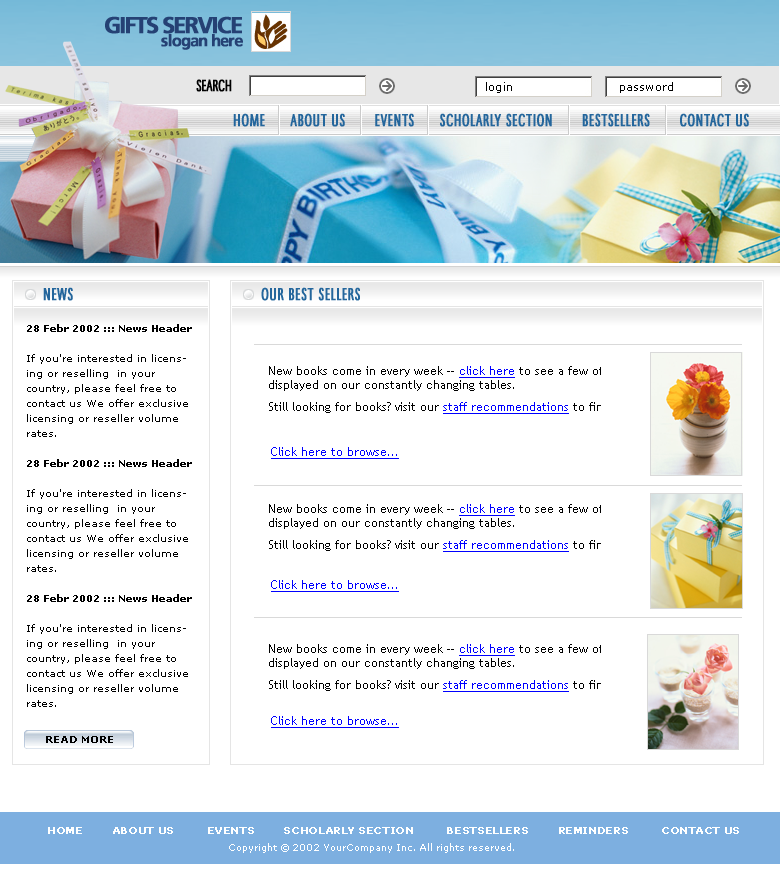
<style>
.page{position:relative;width:780px;height:884px;background:#ffffff}
.page>*{position:absolute;margin:0}
.t1{font:23px/13px "AGForeignerLightBoldBold";letter-spacing:-0.08em;color:#254174;font-weight:bold}
.t2{font:16px/13px "AGForeignerLightBoldBold";letter-spacing:-0.06em;color:#254174;font-weight:bold}
.t3{font:17px "MaximaCyrTCY-LighComp";letter-spacing:-0.02em;color:#000000;font-weight:bold}
.t4{font:11px "Verdana";letter-spacing:0.02em;color:#000000}
.t5{font:18px "MaximaCyrTCY-LighComp";letter-spacing:0.02em;color:#24669c;font-weight:bold}
.t6{font:10px/15px "Verdana";color:#000000}
.t7{font:10px/15px "Verdana-Bold";color:#000000}
.t8{font:10px "Verdana-Bold";color:#000000}
.t9{font:9px "Verdana";letter-spacing:-0.04em;color:#ffffff;font-weight:bold}
.t10{font:9px "Verdana";color:#ffffff}
</style>
<div class="page">
<p class="t1" style="left:105px;top:16px;width:138px;height:34px">GIFTS SERVICE<br>           <span class="t2">slogan here</span></p>
<p class="t3" style="left:196px;top:79px;width:36px;height:13px">SEARCH</p>
<p class="t4" style="left:486px;top:82px;width:187px;height:11px">login                         password</p>
<p class="t5" style="left:233px;top:113px;width:516px;height:14px">HOME      ABOUT US       EVENTS      SCHOLARLY SECTION       BESTSELLERS       CONTACT US</p>
<p class="t5" style="left:43px;top:287px;width:30px;height:14px">NEWS</p>
<p class="t5" style="left:261px;top:287px;width:99px;height:14px">OUR BEST SELLERS</p>
<p class="t6" style="left:27px;top:324px;width:165px;height:383px"><span class="t7">28 Febr 2002 ::: News Header<br></span><br>If you're interested in licensing or reselling  in your country, please feel free to contact us We offer exclusive licensing or reseller volume rates.<br><br><span class="t7">28 Febr 2002 ::: News Header<br></span><br>If you're interested in licensing or reselling  in your country, please feel free to contact us We offer exclusive licensing or reseller volume rates.<br><br><span class="t7">28 Febr 2002 ::: News Header<br></span><br>If you're interested in licensing or reselling  in your country, please feel free to contact us We offer exclusive licensing or reseller volume rates.</p>
<p class="t8" style="left:46px;top:736px;width:67px;height:7px">READ MORE</p>
<p class="t9" style="left:48px;top:827px;width:691px;height:7px">HOME        ABOUT US         EVENTS        SCHOLARLY SECTION         BESTSELLERS        REMINDERS         CONTACT US</p>
<p class="t10" style="left:229px;top:843px;width:285px;height:10px">Copyright © 2002 YourCompany Inc. All rights reserved.</p>
</div>
